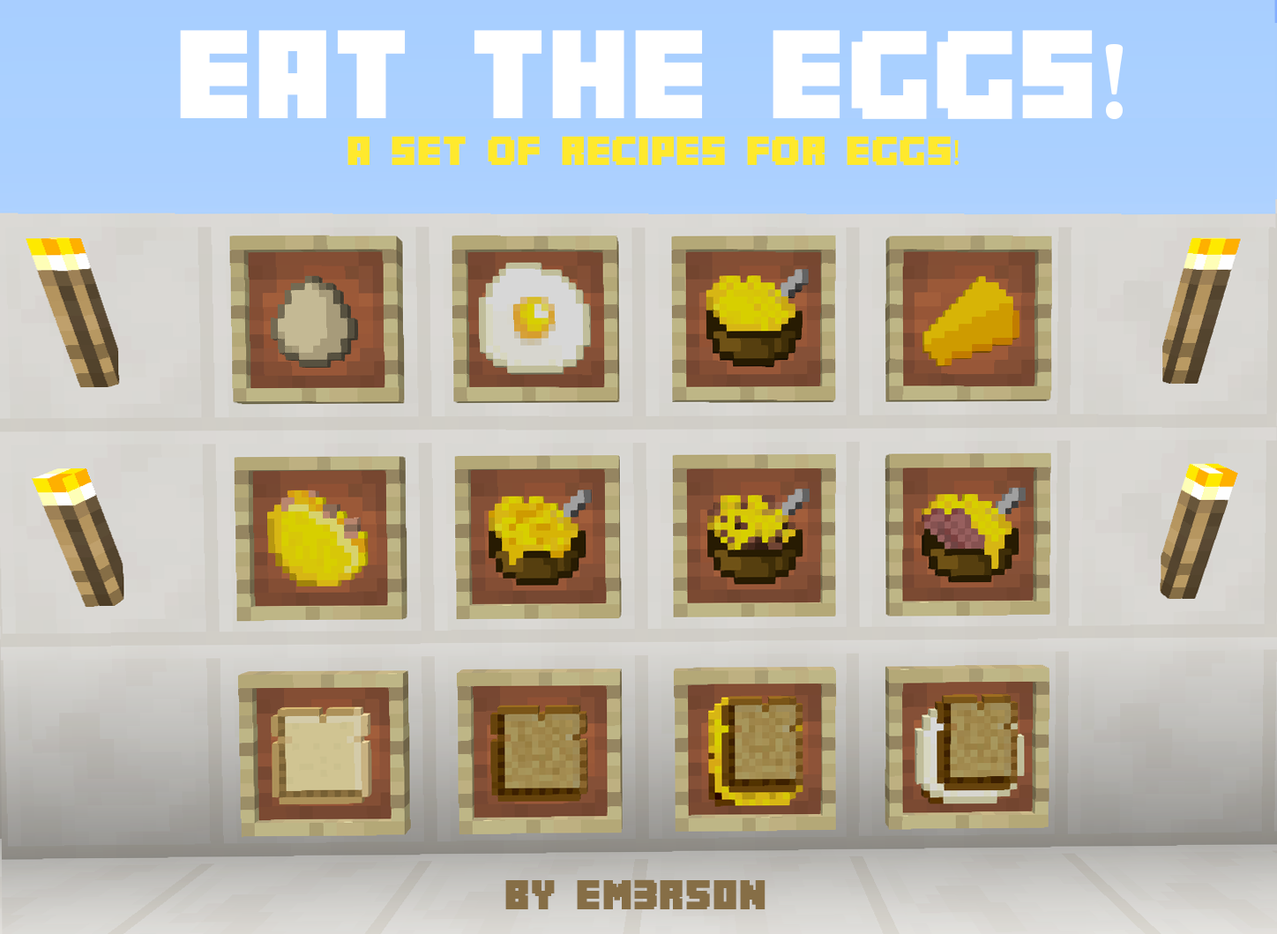
<style>
.page{position:relative;width:1277px;height:934px}
.page>*{position:absolute;margin:0}
.t1{font:112.1px "Minecrafter";letter-spacing:0.03em;color:#ffffff}
.t2{font:112.1px "MinionPro-BoldCn";letter-spacing:0.03em;color:#ffffff}
.t3{font:36.1px "Minecrafter";letter-spacing:0.03em;color:#ffe92d}
.t4{font:36.1px "MyriadPro-Regular";letter-spacing:0.03em;color:#ffe92d}
.t5{font:37px "Minecrafter";letter-spacing:0.03em;color:#866e46}
</style>
<div class="page">
<p class="t1" style="left:180px;top:30px;width:943px;height:90px">EAT THE EGGS<span class="t2">!</span></p>
<p class="t3" style="left:347px;top:136px;width:612px;height:30px">A SET OF RECIPES FOR EGGS<span class="t4">!</span></p>
<p class="t5" style="left:505px;top:879px;width:260px;height:30px">by EM3r50n</p>
</div>
